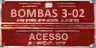
<style>
.page{position:relative;width:96px;height:48px}
.page>*{position:absolute;margin:0}
.t1{font:12px "Calibri-Bold";letter-spacing:0.04em;color:#dfa19a}
.t2{font:9px "Arial-BoldMT";letter-spacing:0.03em;color:#dfa19a}
</style>
<div class="page">
<p class="t1" style="left:11px;top:9px;width:74px;height:9px">BOMBAS 3-02</p>
<p class="t2" style="left:29px;top:33px;width:39px;height:7px">ACESSO</p>
</div>
